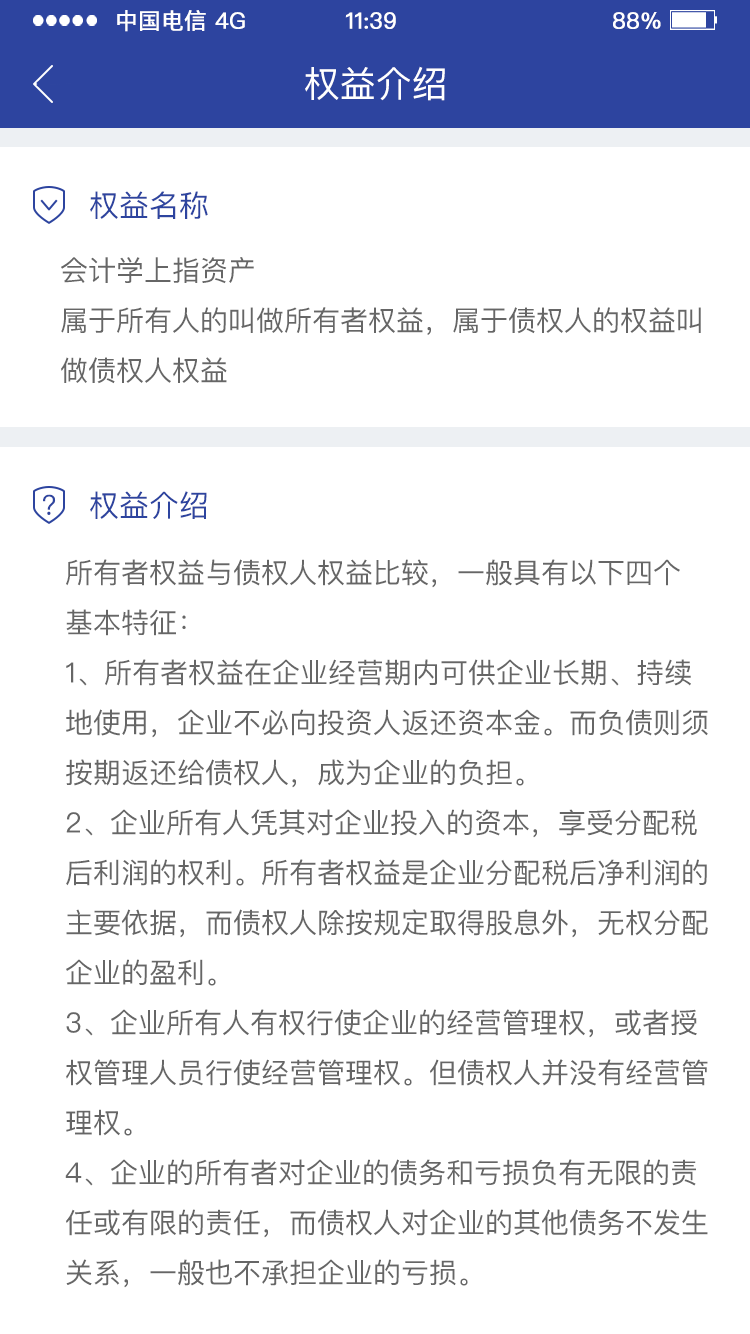
<style>
.page{position:relative;width:750px;height:1334px;background:#ffffff}
.page>*{position:absolute;margin:0}
.t1{font:22.5px "PingFangSC-Regular";color:#ffffff;text-transform:uppercase;font-weight:bold}
.t2{font:36px "PingFangSC-Regular";color:#ffffff;text-transform:uppercase}
.t3{font:30px "PingFangSC-Regular";color:#2d449f;text-transform:uppercase}
.t4{font:28px/50px "PingFangSC-Regular";color:#666666;text-transform:uppercase}
.t5{font:28px "PingFangSC-Regular";color:#2d449f;text-transform:uppercase}
</style>
<div class="page">
<p class="t1" style="left:117px;top:10px;width:89px;height:22px">中国电信</p>
<p class="t1" style="left:215px;top:12px;width:30px;height:17px">4G</p>
<p class="t1" style="left:345px;top:12px;width:51px;height:17px">11:39</p>
<p class="t1" style="left:613px;top:12px;width:48px;height:17px">88%</p>
<p class="t2" style="left:305px;top:66px;width:140px;height:35px">权益介绍</p>
<p class="t3" style="left:90px;top:191px;width:118px;height:28px">权益名称</p>
<p class="t4" style="left:61px;top:257px;width:640px;height:127px">会计学上指资产<br>属于所有人的叫做所有者权益，属于债权人的权益叫做债权人权益</p>
<p class="t5" style="left:43px;top:494px;width:13px;height:21px">?</p>
<p class="t3" style="left:90px;top:491px;width:117px;height:28px">权益介绍</p>
<p class="t4" style="left:65px;top:559px;width:643px;height:729px">所有者权益与债权人权益比较，一般具有以下四个<br>基本特征：<br>1、所有者权益在企业经营期内可供企业长期、持续地使用，企业不必向投资人返还资本金。而负债则须按期返还给债权人，成为企业的负担。<br>2、企业所有人凭其对企业投入的资本，享受分配税后利润的权利。所有者权益是企业分配税后净利润的主要依据，而债权人除按规定取得股息外，无权分配企业的盈利。<br>3、企业所有人有权行使企业的经营管理权，或者授权管理人员行使经营管理权。但债权人并没有经营管理权。<br>4、企业的所有者对企业的债务和亏损负有无限的责任或有限的责任，而债权人对企业的其他债务不发生关系，一般也不承担企业的亏损。</p>
</div>
